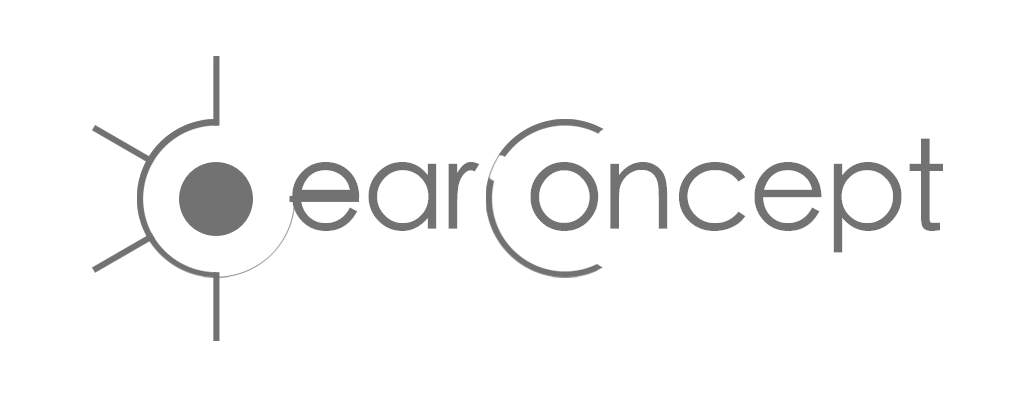
<style>
.page{position:relative;width:1024px;height:410px;background:#ffffff}
.page>*{position:absolute;margin:0}
.t1{font:122.3px "STHeitiTC-Light";letter-spacing:-0.026em;color:#727272}
</style>
<div class="page">
<p class="t1" style="left:530px;top:138px;width:413px;height:115px">oncept</p>
<p class="t1" style="left:292px;top:162px;width:188px;height:69px">ear</p>
</div>
